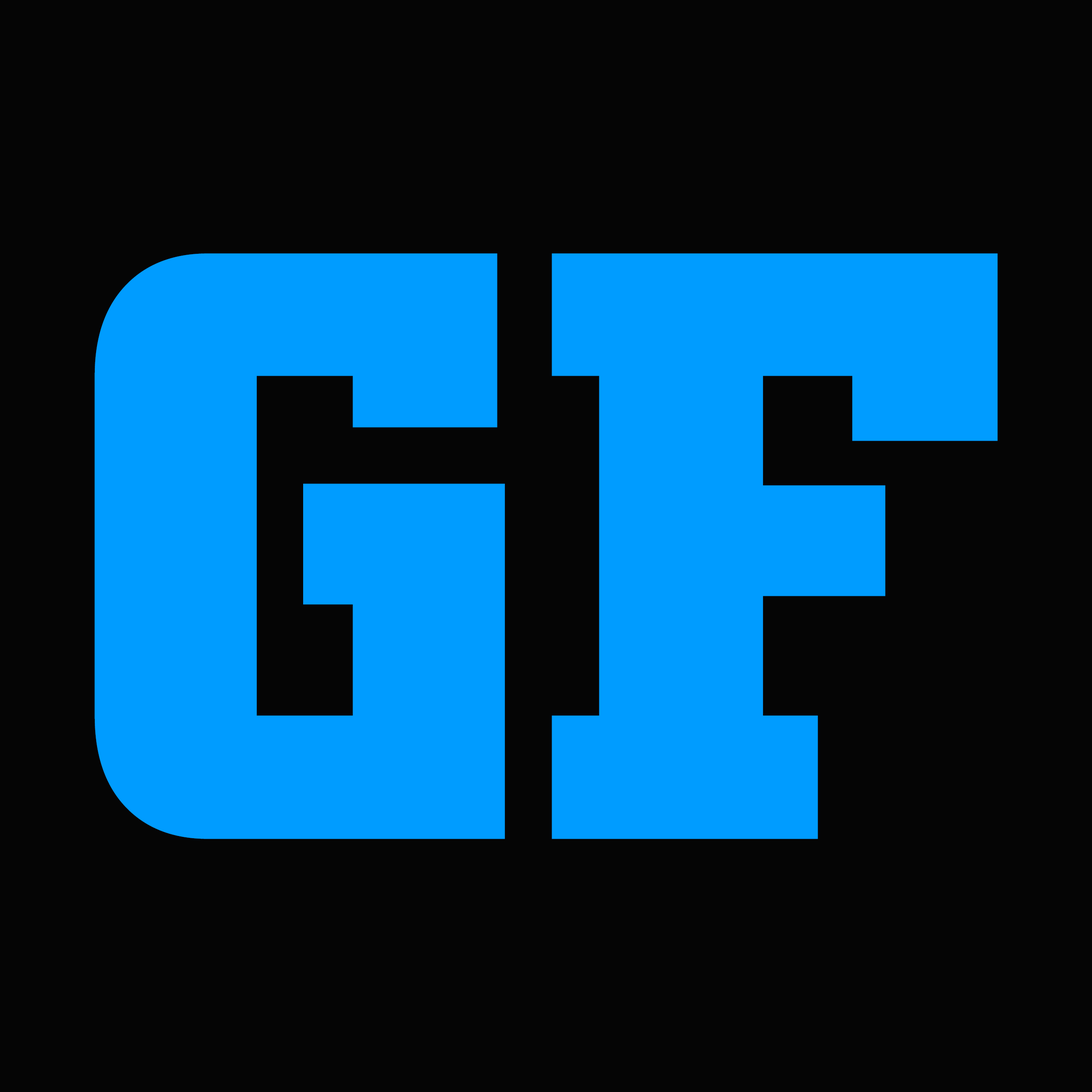
<style>
.page{position:relative;width:1092px;height:1092px;background:#050505}
.page>*{position:absolute;margin:0}
.t1{font:843.3px "SquareSlab711BdEU-Normal";color:#009cff}
</style>
<div class="page">
<p class="t1" style="left:94px;top:253px;width:904px;height:586px">GF</p>
</div>
